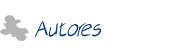
<style>
.page{position:relative;width:180px;height:53px;background:#ffffff}
.page>*{position:absolute;margin:0}
.t1{font:24px "AirCutLight";color:#0b3788}
</style>
<div class="page">
<p class="t1" style="left:34px;top:21px;width:68px;height:17px">Autores</p>
</div>
